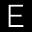
<style>
.page{position:relative;width:32px;height:32px;background:#000000}
.page>*{position:absolute;margin:0}
.t1{font:31.7px "Montserrat-Regular";letter-spacing:0.16em;color:#ffffff;text-transform:uppercase;scale:0.95 1}
</style>
<div class="page">
<p class="t1" style="left:8px;top:4px;width:16px;height:23px">E</p>
</div>
